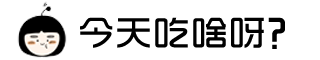
<style>
.page{position:relative;width:320px;height:60px;background:#ffffff}
.page>*{position:absolute;margin:0}
.t1{font:36px "TRENDS";letter-spacing:0.05em;color:#000000}
</style>
<div class="page">
<p class="t1" style="left:80px;top:17px;width:205px;height:32px">今天吃啥呀？</p>
</div>
